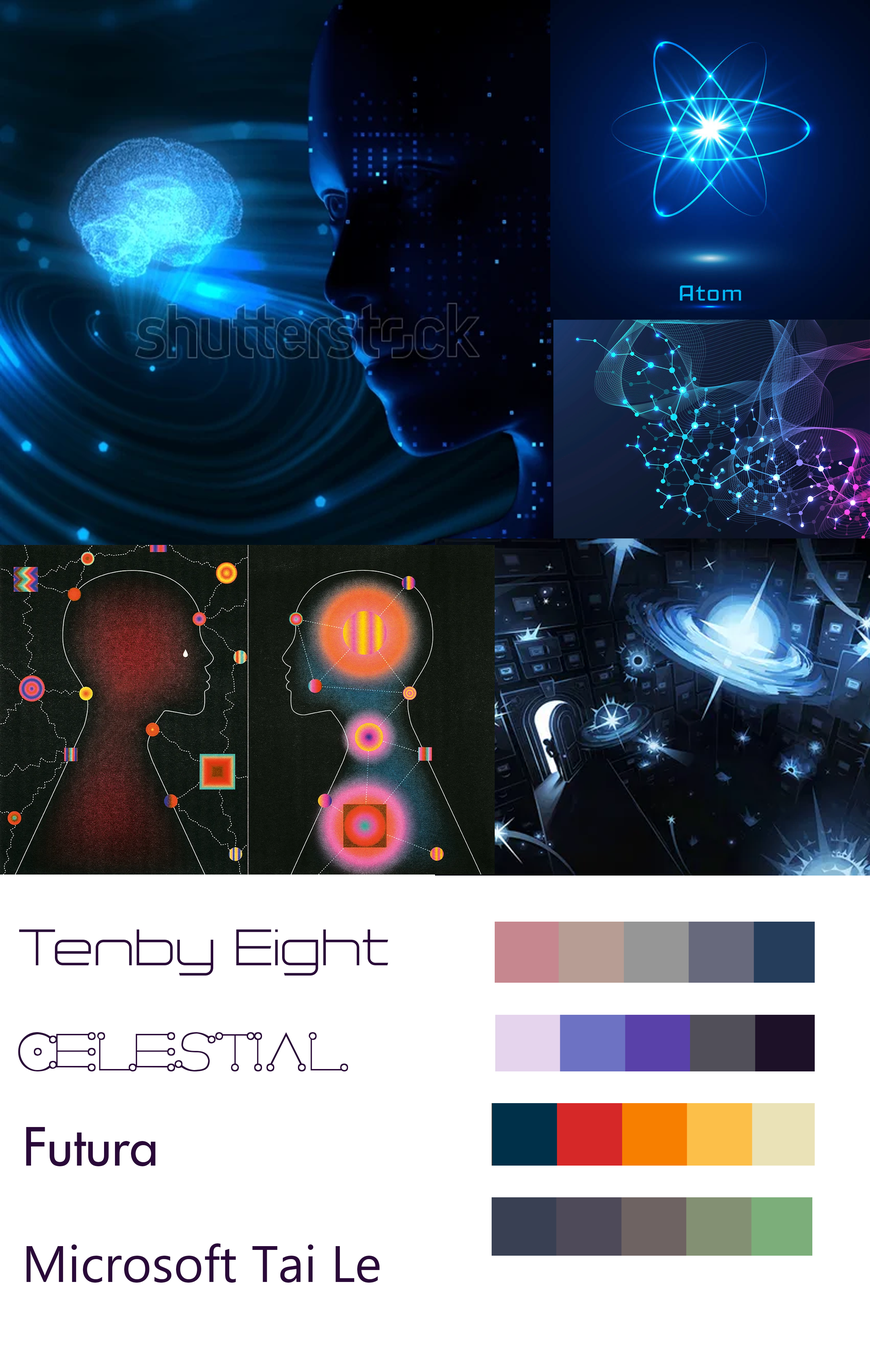
<style>
.page{position:relative;width:870px;height:1371px;background:#ffffff}
.page>*{position:absolute;margin:0}
.t1{font:51.3px "TenbyEightLight";color:#2a0939}
.t2{font:51.3px "CelestialNormal";color:#2a0939}
.t3{font:51.3px "Futura";color:#2a0939}
.t4{font:51.3px "MicrosoftTaiLe";color:#2a0939}
</style>
<div class="page">
<p class="t1" style="left:19px;top:929px;width:369px;height:46px">Tenby Eight</p>
<p class="t2" style="left:18px;top:1032px;width:330px;height:40px">Celestial</p>
<p class="t3" style="left:26px;top:1126px;width:130px;height:40px">Futura</p>
<p class="t4" style="left:26px;top:1243px;width:354px;height:39px">Microsoft Tai Le</p>
</div>
